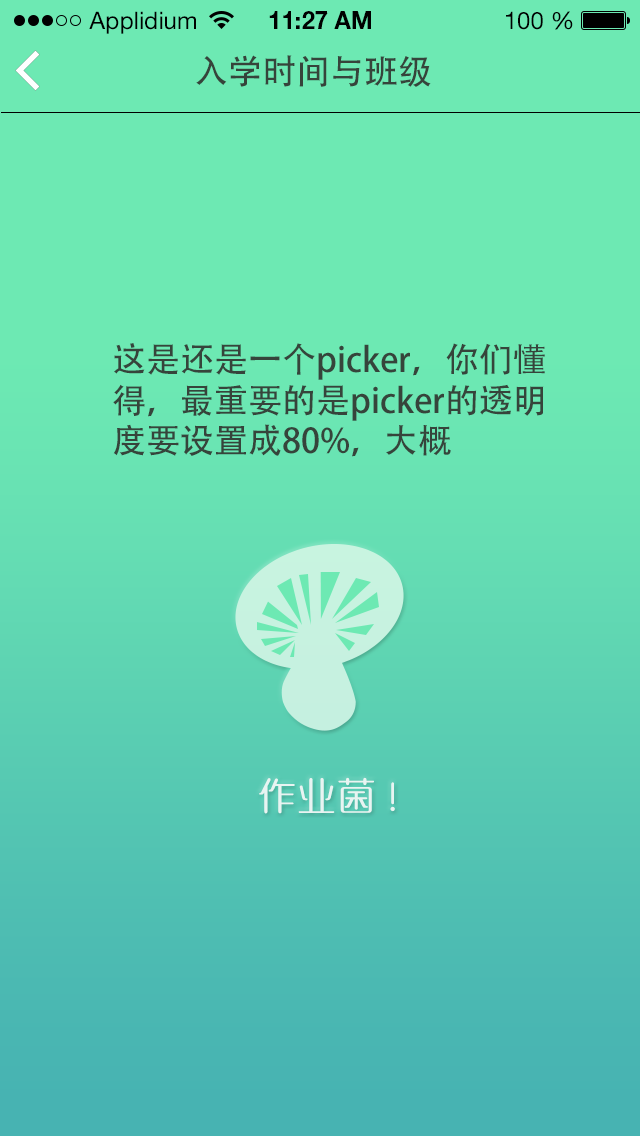
<style>
.page{position:relative;width:640px;height:1136px;background:#6de9b3}
.page>*{position:absolute;margin:0}
.t1{font:24px "HelveticaNeueLTStd-Roman";color:#000000}
.t2{font:24px "HelveticaNeueLTStd-Bd";color:#000000}
.t3{font:34px "AdobeHeitiStd-Regular";color:#36443b}
.t4{font:36px "MFYaYuan_Noncommercial-Regular";letter-spacing:0.1em;color:#fbfbfb}
</style>
<div class="page">
<p class="t1" style="left:89px;top:11px;width:107px;height:23px">Applidium</p>
<p class="t2" style="left:269px;top:11px;width:102px;height:18px">11:27 AM</p>
<p class="t1" style="left:506px;top:11px;width:67px;height:19px">100 %</p>
<p class="t3" style="left:196px;top:55px;width:235px;height:32px">入学时间与班级</p>
<p class="t3" style="left:113px;top:343px;width:432px;height:114px">这是还是一个picker，你们懂得，最重要的是picker的透明度要设置成80%，大概</p>
<p class="t4" style="left:259px;top:777px;width:136px;height:37px;opacity:0.86">作业菌 !</p>
</div>
